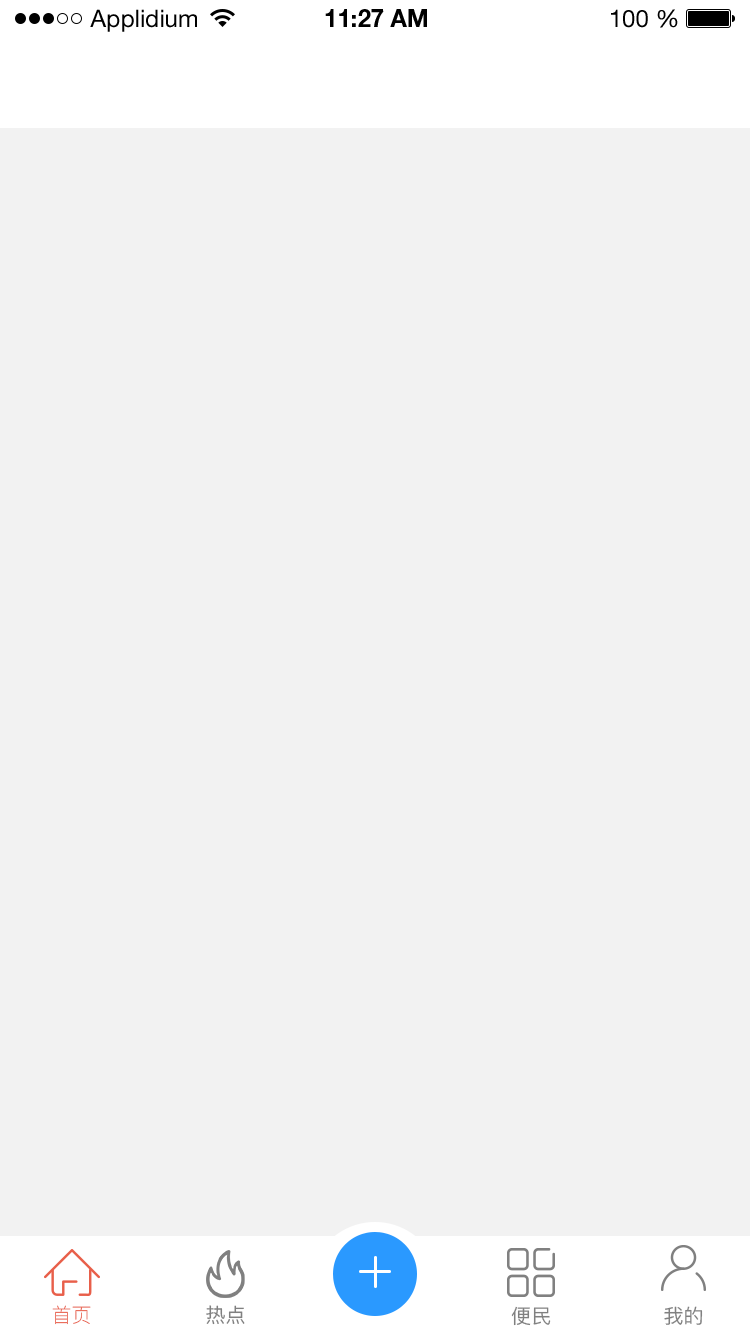
<style>
.page{position:relative;width:750px;height:1334px;background:#f2f2f2}
.page>*{position:absolute;margin:0}
.t1{font:24px "HelveticaNeueLTStd-Roman";color:#000000}
.t2{font:24px "HelveticaNeueLTStd-Bd";color:#000000}
.t3{font:20px "PingFang-SC-Light"}
.t4{font:20px "PingFang-SC-Medium";color:#808080}
</style>
<div class="page">
<p class="t1" style="left:90px;top:9px;width:107px;height:23px">Applidium</p>
<p class="t2" style="left:325px;top:9px;width:102px;height:18px">11:27 AM</p>
<p class="t1" style="left:611px;top:9px;width:67px;height:19px">100 %</p>
<p class="t3" style="left:52px;top:1305px;width:39px;height:20px">首页</p>
<p class="t4" style="left:206px;top:1305px;width:39px;height:20px">热点</p>
<p class="t4" style="left:511px;top:1306px;width:40px;height:20px">便民</p>
<p class="t4" style="left:664px;top:1306px;width:39px;height:19px">我的</p>
</div>
